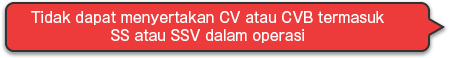
<style>
.page{position:relative;width:450px;height:58px;background:#ed3b3b}
.page>*{position:absolute;margin:0}
.t1{font:14px/18px "GothicMB101Pro-Regular";color:#ffffff}
</style>
<div class="page">
<p class="t1" style="left:31px;top:11px;width:353px;height:32px;text-align:center">Tidak dapat menyertakan CV atau CVB termasuk<br>SS atau SSV dalam operasi</p>
</div>
